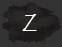
<style>
.page{position:relative;width:62px;height:47px;background:#333333}
.page>*{position:absolute;margin:0}
.t1{font:24px "TempusSansITC";color:#ffffff}
</style>
<div class="page">
<p class="t1" style="left:22px;top:14px;width:15px;height:17px">Z</p>
</div>
